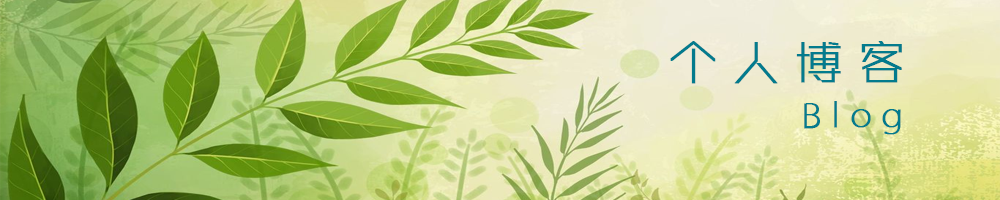
<style>
.page{position:relative;width:1000px;height:200px}
.page>*{position:absolute;margin:0}
.t1{font:49px "ZHSRXT--GBK1-0";letter-spacing:0.26em;color:#037b8d;font-weight:bold}
.t2{font:36px "ZHSRXT--GBK1-0";letter-spacing:0.26em;color:#037b8d;font-weight:bold}
</style>
<div class="page">
<p class="t1" style="left:670px;top:41px;width:232px;height:43px">个人博客</p>
<p class="t2" style="left:804px;top:101px;width:97px;height:34px">Blog</p>
</div>
